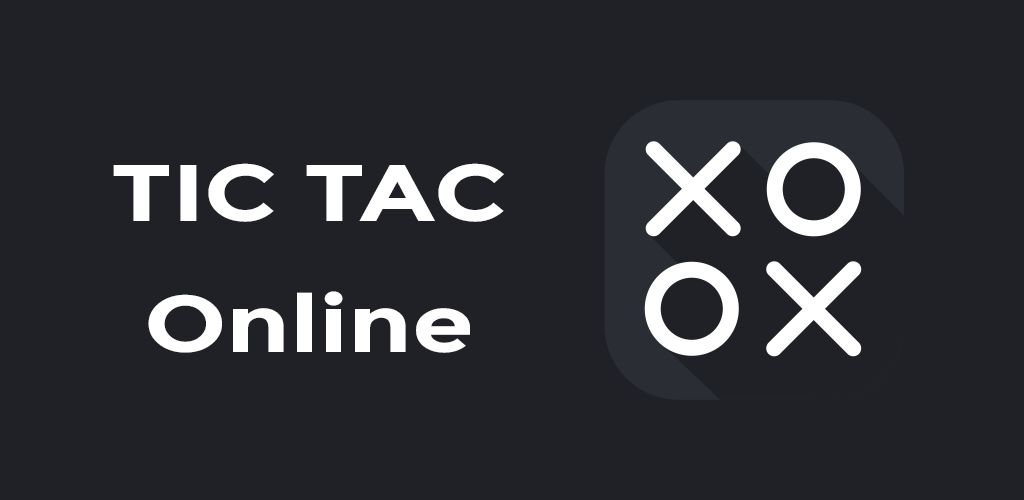
<style>
.page{position:relative;width:1024px;height:500px;background:#1f2126}
.page>*{position:absolute;margin:0}
.t1{font:80px "Montserrat-Bold";color:#ffffff;scale:1.25 1}
</style>
<div class="page">
<p class="t1" style="left:113px;top:163px;width:391px;height:59px">TIC TAC</p>
<p class="t1" style="left:148px;top:291px;width:322px;height:62px">Online</p>
</div>
